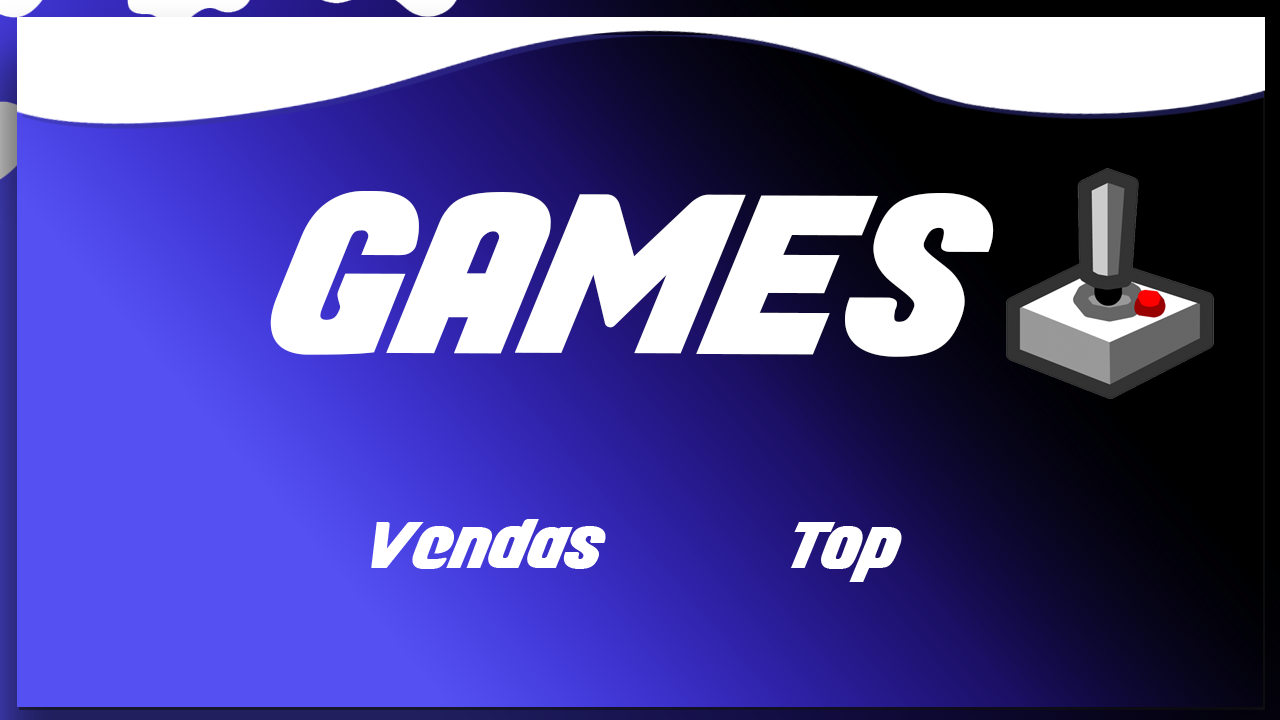
<style>
.page{position:relative;width:1280px;height:720px}
.page>*{position:absolute;margin:0}
.t1{font:215.7px "Longhaul";color:#ffffff}
.t2{font:63.2px "Longhaul";color:#ffffff}
</style>
<div class="page">
<p class="t1" style="left:270px;top:191px;width:724px;height:166px">GAMES</p>
<p class="t2" style="left:371px;top:519px;width:235px;height:50px">Vendas</p>
<p class="t2" style="left:790px;top:522px;width:112px;height:60px">Top</p>
</div>
